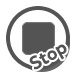
<style>
.page{position:relative;width:76px;height:76px;background:#ffffff}
.page>*{position:absolute;margin:0}
.t1{font:18.8px "MikadoMedium";color:#535453}
</style>
<div class="page">
<p class="t1" style="left:29px;top:44px;width:38px;height:26px;rotate:-30deg">Stop</p>
</div>
